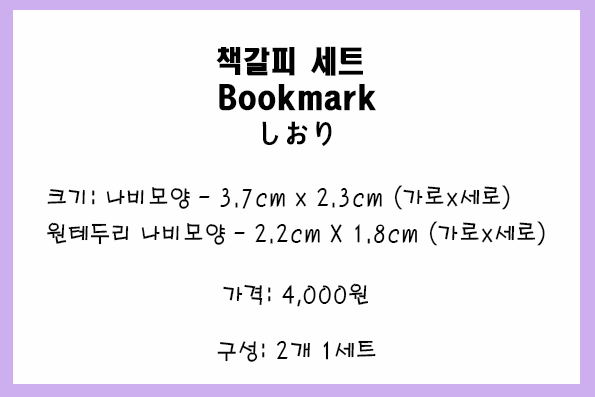
<style>
.page{position:relative;width:595px;height:397px;background:#fffefe}
.page>*{position:absolute;margin:0}
.t1{font:30px/36px "HeadlineR-HM";color:#010101;scale:0.9 1}
.t2{font:24px/36px "H2porM";color:#040404;scale:0.9 1}
.t3{font:24px "H2porM";color:#040404;scale:0.9 1}
</style>
<div class="page">
<p class="t1" style="left:216px;top:46px;width:160px;height:100px;text-align:center">책갈피 세트 <br>Bookmark<br>しおり</p>
<p class="t2" style="left:47px;top:185px;width:498px;height:61px">크기: 나비모양 - 3.7cm x 2.3cm (가로x세로)<br>원테두리 나비모양 - 2.2cm X 1.8cm (가로x세로)</p>
<p class="t3" style="left:223px;top:283px;width:146px;height:24px">가격: 4,000원</p>
<p class="t3" style="left:217px;top:340px;width:159px;height:22px">구성: 2개 1세트</p>
</div>
